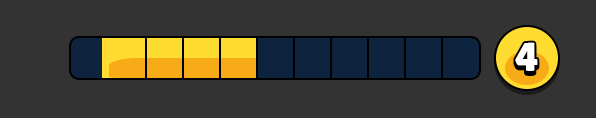
<style>
.page{position:relative;width:596px;height:118px;background:#333333}
.page>*{position:absolute;margin:0}
.t1{font:40px "LilitaOne";color:#ffffff;text-transform:uppercase}
</style>
<div class="page">
<p class="t1" style="left:515px;top:42px;width:23px;height:29px">4</p>
</div>
